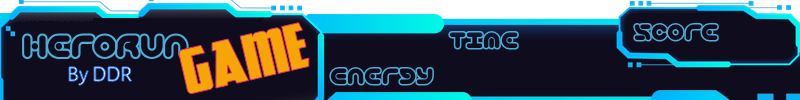
<style>
.page{position:relative;width:800px;height:100px;background:#0e0c1d}
.page>*{position:absolute;margin:0}
.t1{font:53px "GreatLakesNF";color:#f7a505}
.t2{font:21px "TechniqueOLBRK";color:#4daed7}
.t3{font:29px "TechniqueOLBRK";color:#4daed7}
.t4{font:22px "AlegreyaSans-Regular"}
</style>
<div class="page">
<p class="t1" style="left:177px;top:21px;width:133px;height:74px;rotate:-13deg">GAME</p>
<p class="t2" style="left:448px;top:30px;width:71px;height:20px">Time</p>
<p class="t2" style="left:633px;top:22px;width:86px;height:20px">Score</p>
<p class="t3" style="left:22px;top:33px;width:167px;height:27px">HeroRun</p>
<p class="t4" style="left:68px;top:65px;width:65px;height:22px">By DDR</p>
<p class="t2" style="left:329px;top:66px;width:105px;height:20px">Energy</p>
</div>
